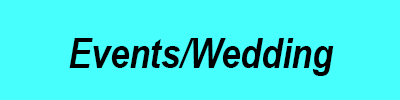
<style>
.page{position:relative;width:400px;height:100px;background:#47fffd}
.page>*{position:absolute;margin:0}
.t1{font:41.7px "ArialNarrow-BoldItalic";color:#000000}
</style>
<div class="page">
<p class="t1" style="left:69px;top:38px;width:265px;height:38px">Events/Wedding</p>
</div>
